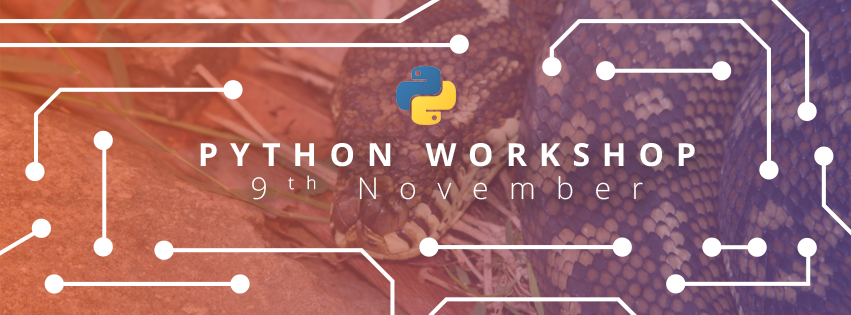
<style>
.page{position:relative;width:851px;height:315px}
.page>*{position:absolute;margin:0}
.t1{font:31.8px "OpenSans-Bold";letter-spacing:0.38em;color:#ffffff}
.t2{font:30.1px "OpenSans-Light";letter-spacing:0.68em;color:#ffffff}
</style>
<div class="page">
<p class="t1" style="left:200px;top:143px;width:495px;height:24px">PYTHON WORKSHOP</p>
<p class="t2" style="left:252px;top:175px;width:391px;height:25px">9th November</p>
</div>
